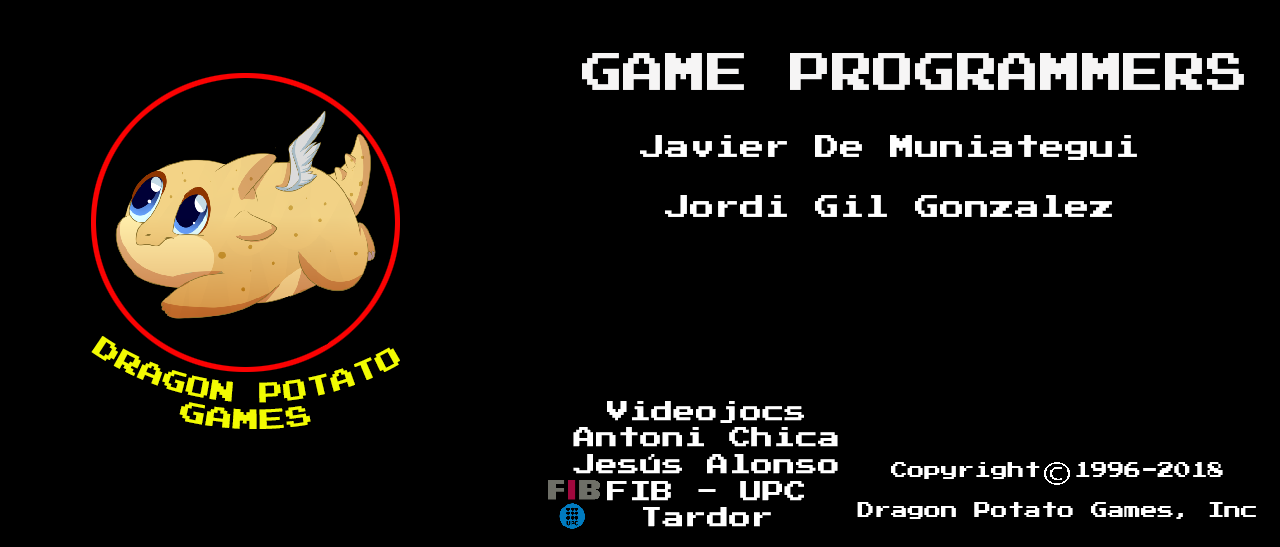
<style>
.page{position:relative;width:1280px;height:547px;background:#000000}
.page>*{position:absolute;margin:0}
.t1{font:41.7px "PressStart2P";color:#f6f5f5}
.t2{font:25px "PressStart2P";color:#ffffff}
.t3{font:22.2px "PressStart2P";color:#ffffff}
</style>
<div class="page">
<p class="t1" style="left:582px;top:53px;width:662px;height:37px">GAME PROGRAMMERS</p>
<p class="t2" style="left:640px;top:135px;width:497px;height:82px;text-align:center">Javier De Muniategui<br><br>Jordi Gil Gonzalez</p>
<p class="t3" style="left:573px;top:401px;width:265px;height:126px;text-align:center">Videojocs<br>Antoni Chica<br>Jesús Alonso<br>FIB - UPC<br>Tardor</p>
</div>
